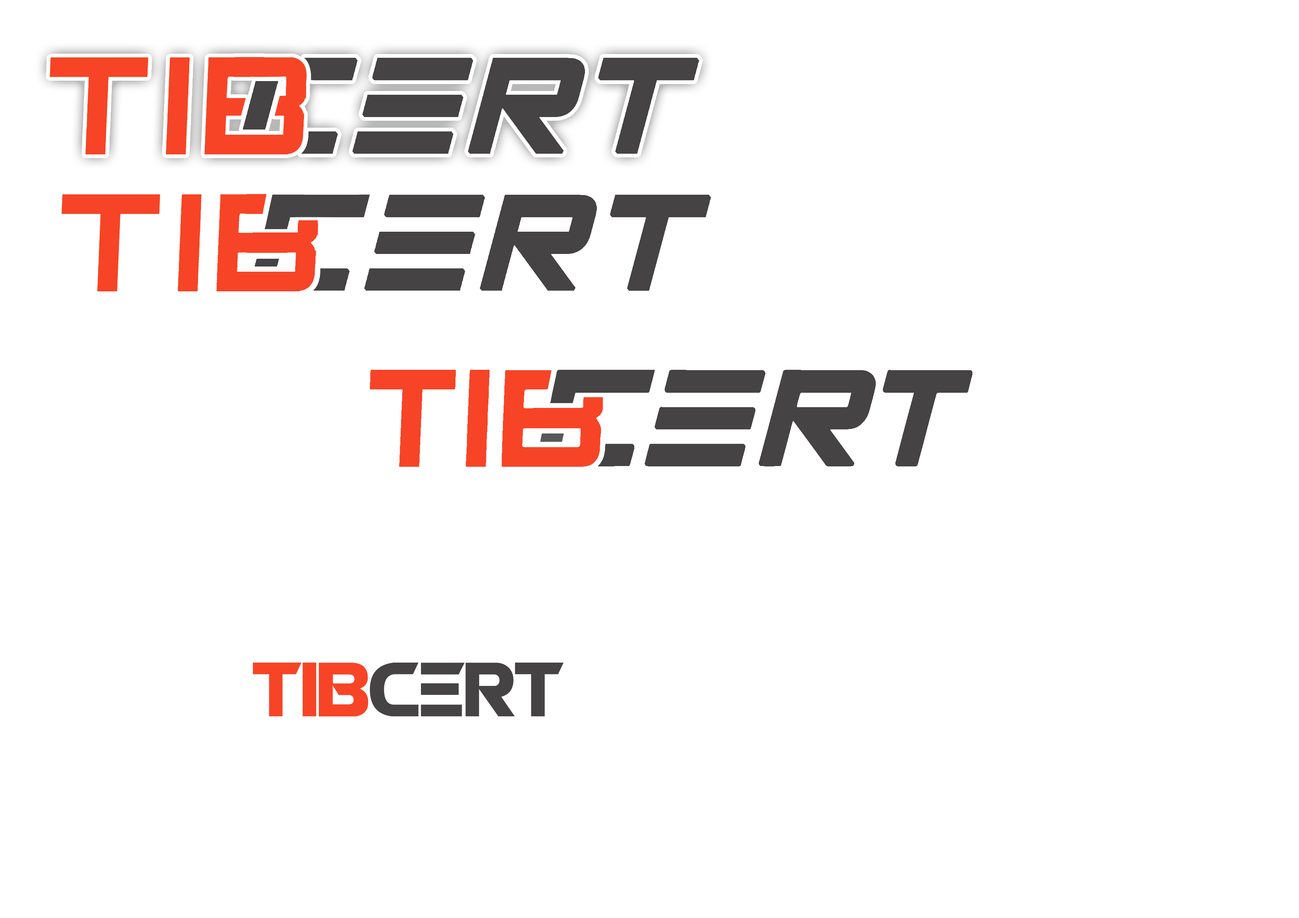
<style>
.page{position:relative;width:1299px;height:918px;background:#ffffff}
.page>*{position:absolute;margin:0}
.t1{font:110.1px "ROBOTECHGP";color:#454343}
.t2{font:110.1px "ROBOTECHGP";color:#f74427}
</style>
<div class="page">
<p class="t1" style="left:253px;top:663px;width:310px;height:54px"><span class="t2">Tib</span>CERT</p>
</div>
